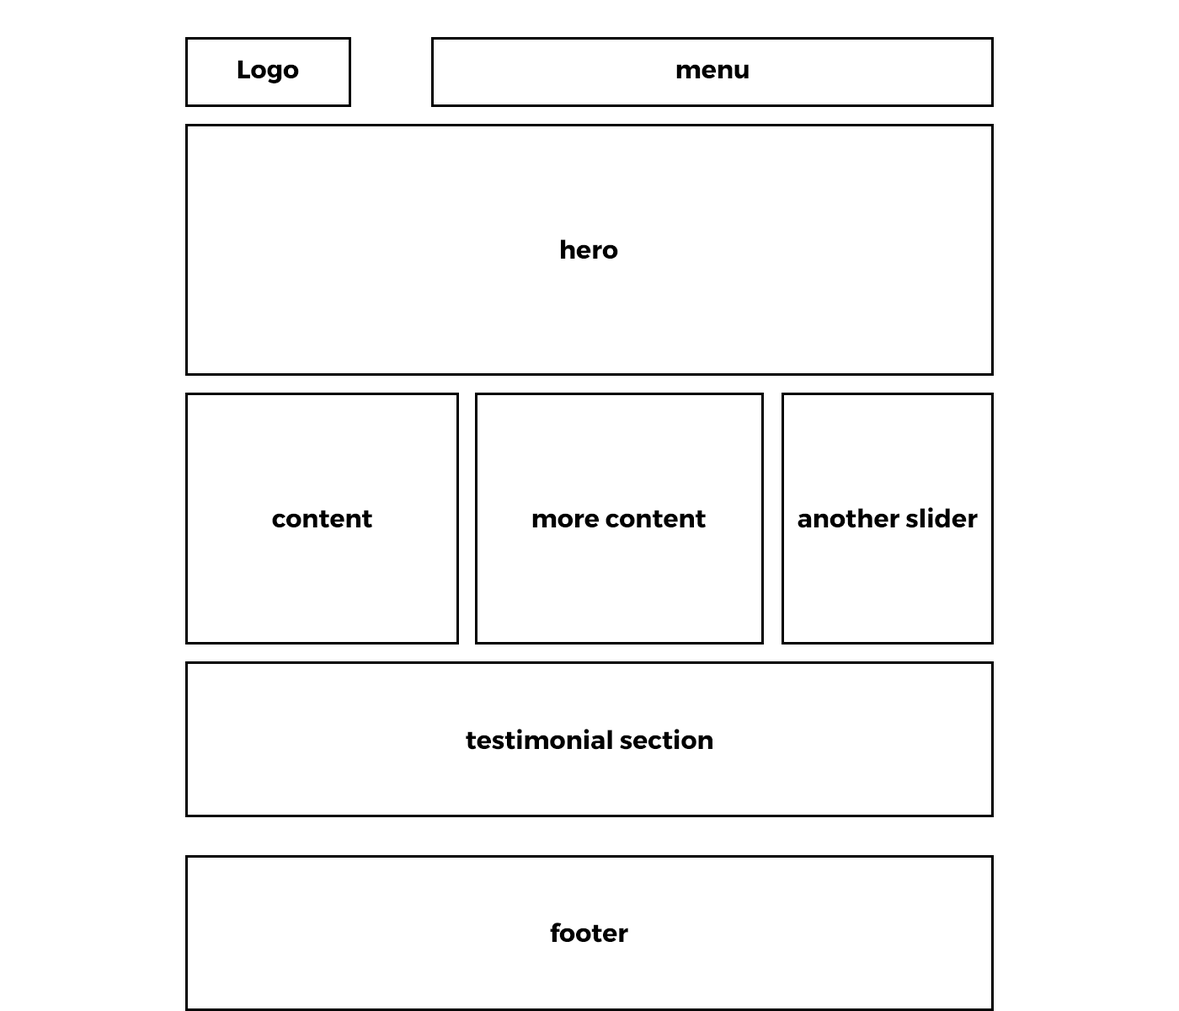
<style>
.page{position:relative;width:1179px;height:1011px;background:#ffffff}
.page>*{position:absolute;margin:0}
.t1{font:25.3px "Montserrat-Bold";color:#000000}
</style>
<div class="page">
<p class="t1" style="left:238px;top:60px;width:61px;height:23px">Logo</p>
<p class="t1" style="left:677px;top:64px;width:72px;height:15px">menu</p>
<p class="t1" style="left:561px;top:239px;width:57px;height:20px">hero</p>
<p class="t1" style="left:272px;top:510px;width:100px;height:18px">content</p>
<p class="t1" style="left:532px;top:510px;width:174px;height:18px">more content</p>
<p class="t1" style="left:798px;top:507px;width:180px;height:21px">another slider</p>
<p class="t1" style="left:466px;top:729px;width:247px;height:21px">testimonial section</p>
<p class="t1" style="left:550px;top:923px;width:78px;height:20px">footer</p>
</div>
